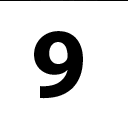
<style>
.page{position:relative;width:128px;height:128px;background:#ffffff}
.page>*{position:absolute;margin:0}
.t1{font:100px "MyriadHebrew-Bold";color:#000000}
</style>
<div class="page">
<p class="t1" style="left:34px;top:30px;width:49px;height:68px">9</p>
</div>
